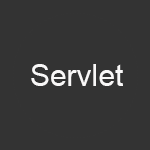
<style>
.page{position:relative;width:150px;height:150px;background:#333333}
.page>*{position:absolute;margin:0}
.t1{font:30px "ArialMT";color:#f9f8f8}
</style>
<div class="page">
<p class="t1" style="left:31px;top:64px;width:92px;height:22px">Servlet</p>
</div>
